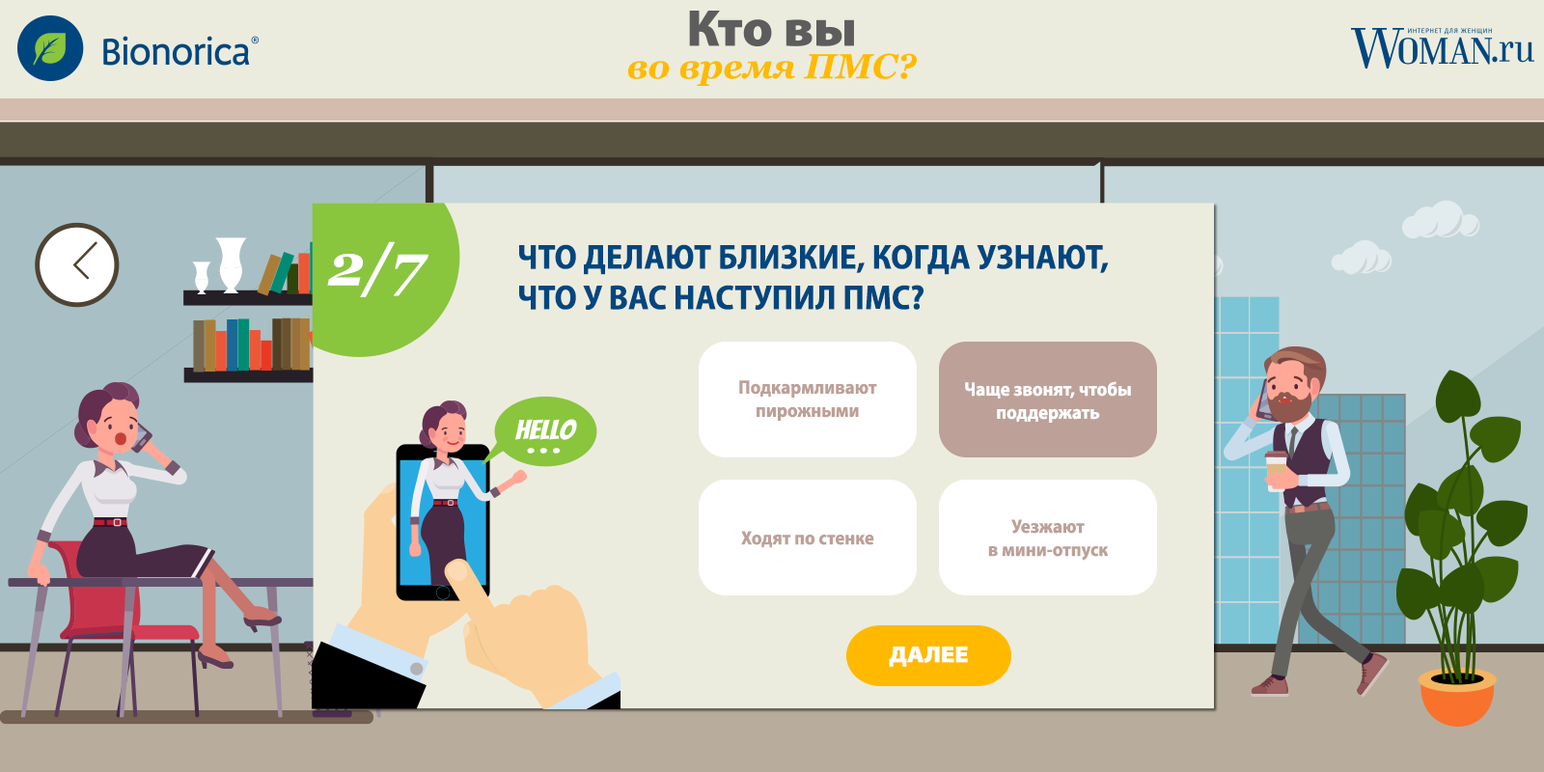
<style>
.page{position:relative;width:1544px;height:772px;background:#ececde}
.page>*{position:absolute;margin:0}
.t1{font:57.9px "Georgia-BoldItalic";color:#ffffff}
.t2{font:34.7px/40.5px "MyriadPro-BoldSemiCn";color:#00467f;text-transform:uppercase}
.t3{font:19.3px "MyriadPro-BoldSemiCn";color:#bda098}
.t4{font:19.3px "MyriadPro-BoldSemiCn";color:#ffffff}
.t5{font:23.2px "MyriadPro-BlackSemiExt";color:#ffffff;text-transform:uppercase}
</style>
<div class="page">
<p class="t1" style="left:327px;top:241px;width:102px;height:56px">2/7</p>
<p class="t2" style="left:519px;top:244px;width:590px;height:66px">Что делают близкие, когда узнают, <br>что у вас наступил ПМС?</p>
<p class="t3" style="left:739px;top:380px;width:138px;height:41px;text-align:center">Подкармливают пирожными</p>
<p class="t4" style="left:965px;top:381px;width:166px;height:42px;text-align:center">Чаще звонят, чтобы поддержать</p>
<p class="t3" style="left:988px;top:519px;width:121px;height:42px;text-align:center">Уезжают <br>в мини-отпуск</p>
<p class="t3" style="left:741px;top:531px;width:133px;height:17px">Ходят по стенке</p>
<p class="t5" style="left:889px;top:647px;width:79px;height:20px">далее</p>
</div>
